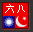
<style>
.page{position:relative;width:33px;height:32px;background:#f20000}
.page>*{position:absolute;margin:0}
.t1{font:10.4px "SimSun";color:#ffffff}
</style>
<div class="page">
<p class="t1" style="left:5px;top:4px;width:20px;height:9px">六八</p>
</div>
